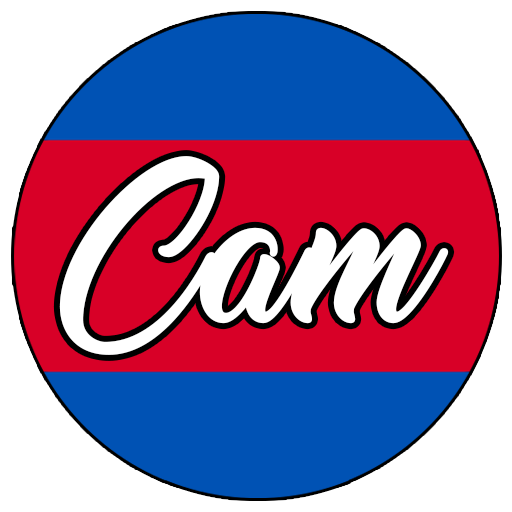
<style>
.page{position:relative;width:512px;height:512px;background:#ffffff}
.page>*{position:absolute;margin:0}
.t1{font:151.4px "ThinkingOfBettyLight";letter-spacing:0.02em;color:#ffffff;font-weight:bold;scale:0.96 1}
</style>
<div class="page">
<p class="t1" style="left:59px;top:156px;width:390px;height:199px">Cam</p>
</div>
